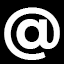
<style>
.page{position:relative;width:64px;height:64px;background:#000000}
.page>*{position:absolute;margin:0}
.t1{font:58px "Montserrat-Bold";color:#fefefe}
</style>
<div class="page">
<p class="t1" style="left:4px;top:7px;width:56px;height:53px">@</p>
</div>
